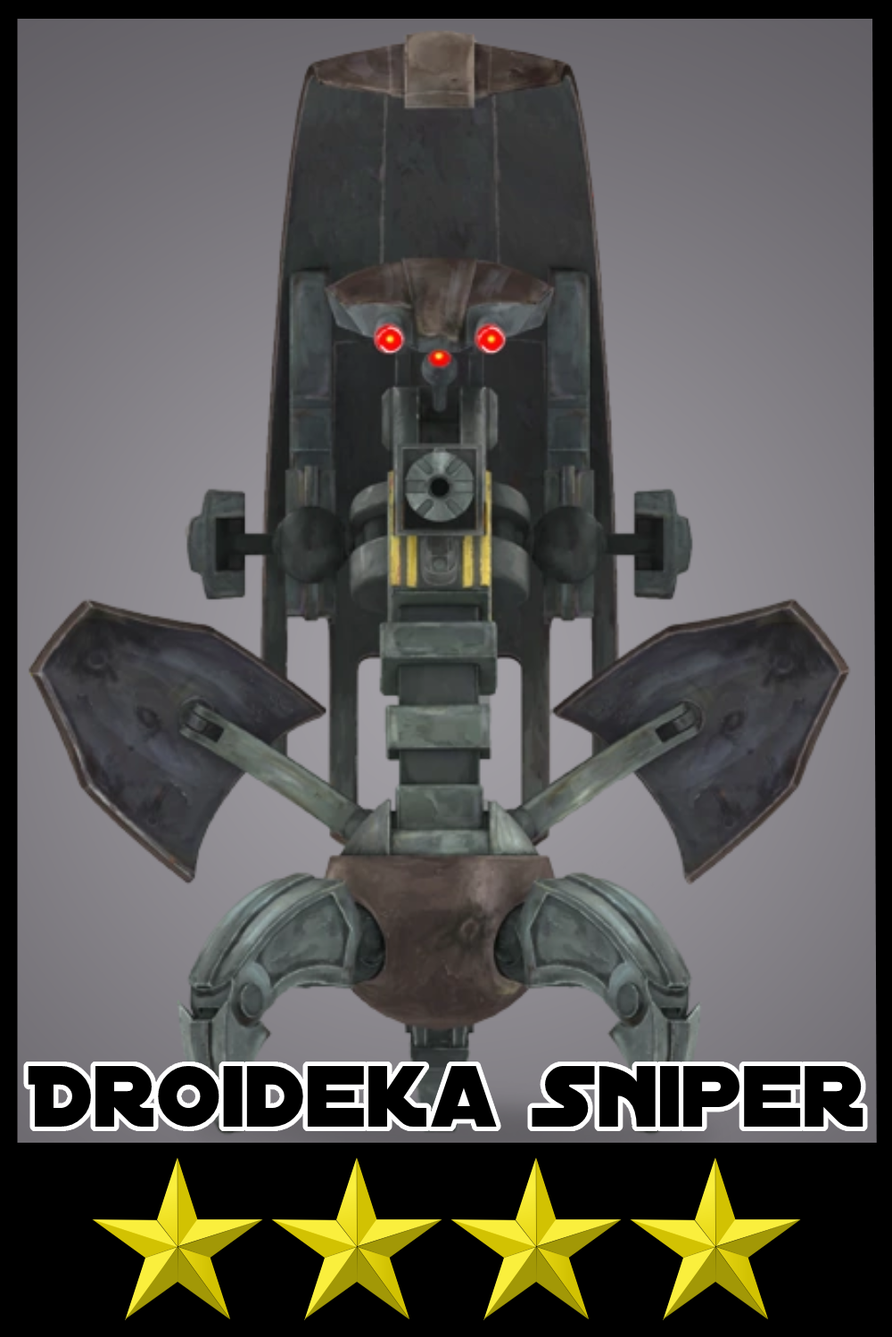
<style>
.page{position:relative;width:892px;height:1337px}
.page>*{position:absolute;margin:0}
.t1{font:93.4px "DistantGalaxy";color:#000000}
</style>
<div class="page">
<p class="t1" style="left:28px;top:1066px;width:835px;height:61px">Droideka Sniper</p>
</div>
